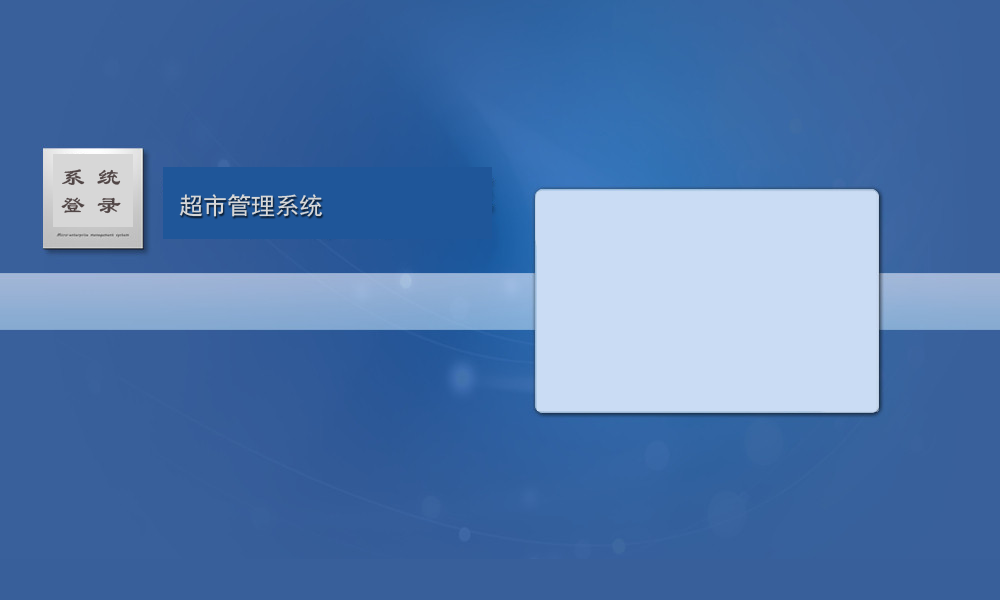
<style>
.page{position:relative;width:1000px;height:600px}
.page>*{position:absolute;margin:0}
.t1{font:24px "LiSu";color:#514646}
.t2{font:24px "SimHei";color:#d7d7d7}
</style>
<div class="page">
<p class="t1" style="left:62px;top:169px;width:59px;height:16px">系 统</p>
<p class="t1" style="left:61px;top:197px;width:60px;height:17px">登 录</p>
<p class="t2" style="left:179px;top:194px;width:143px;height:23px">超市管理系统</p>
</div>
